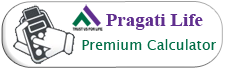
<style>
.page{position:relative;width:226px;height:70px;background:#ffffff}
.page>*{position:absolute;margin:0}
.t1{font:18.9px "TimesNewRomanPS-BoldMT";color:#602e8e}
.t2{font:14.2px "LucidaSansUnicode";color:#006e46}
</style>
<div class="page">
<p class="t1" style="left:106px;top:14px;width:97px;height:16px">Pragati Life</p>
<p class="t2" style="left:82px;top:39px;width:134px;height:11px">Premium Calculator</p>
</div>
